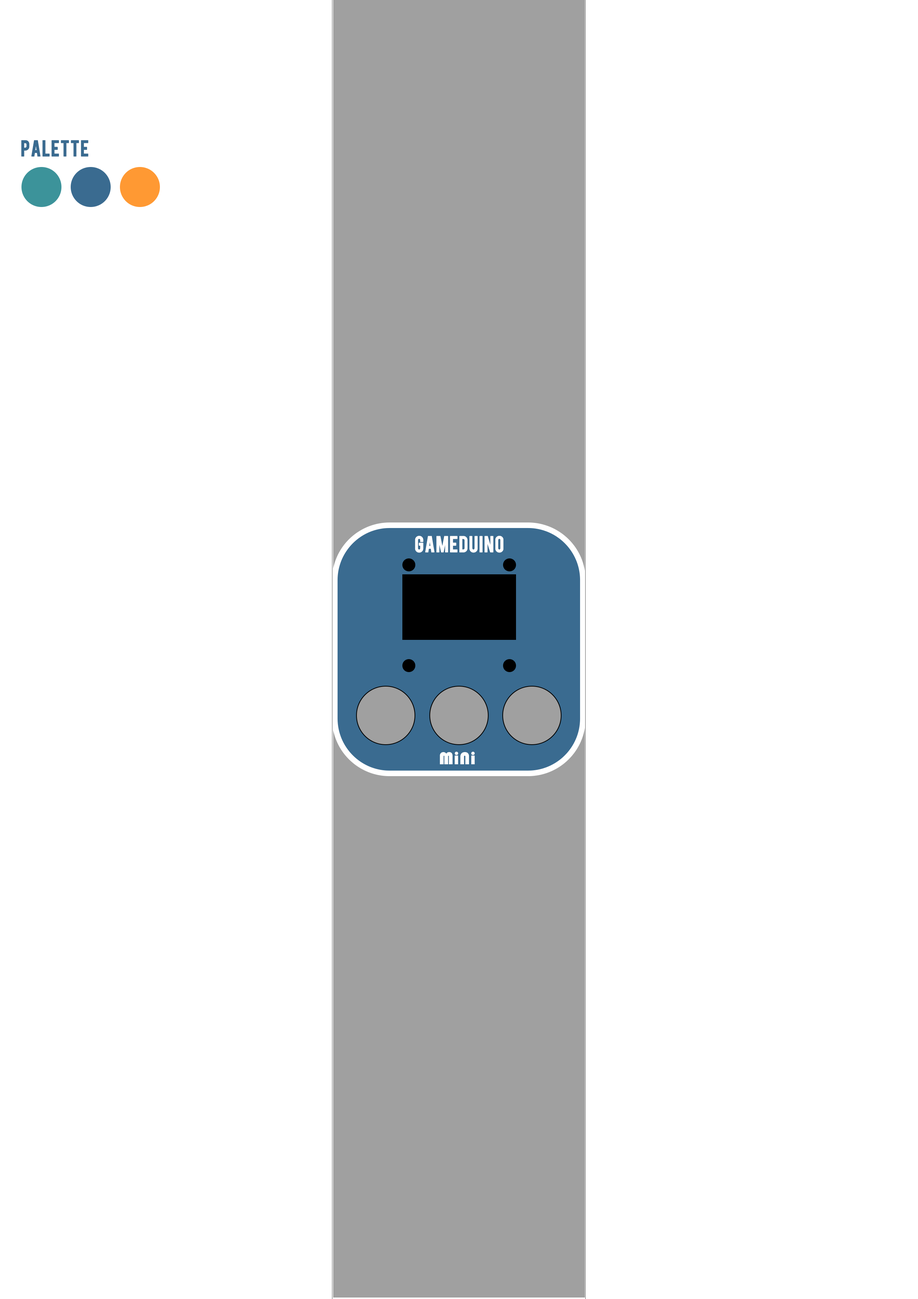
<style>
.page{position:relative;width:918px;height:1299px;background:#ffffff}
.page>*{position:absolute;margin:0}
.t1{font:17.8px "Bebas";letter-spacing:0.025em;color:#3a6b90;font-weight:bold}
.t2{font:17.8px "Bebas";letter-spacing:0.025em;color:#ffffff;font-weight:bold}
.t3{font:17.8px "Bauhaus93";letter-spacing:0.025em;color:#ffffff}
</style>
<div class="page">
<p class="t1" style="left:21px;top:140px;width:67px;height:17px">Palette</p>
<p class="t2" style="left:415px;top:536px;width:89px;height:17px">gameduino</p>
<p class="t3" style="left:440px;top:752px;width:35px;height:12px">MiNi</p>
</div>
